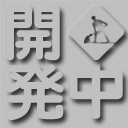
<style>
.page{position:relative;width:128px;height:128px;background:#c0c0c0}
.page>*{position:absolute;margin:0}
.t1{font:60.5px "FGPMaruGothicCa-U";color:#c0c0c0}
</style>
<div class="page">
<p class="t1" style="left:6px;top:5px;width:54px;height:56px">開</p>
<p class="t1" style="left:6px;top:64px;width:58px;height:56px">発</p>
<p class="t1" style="left:69px;top:60px;width:54px;height:59px">中</p>
</div>
